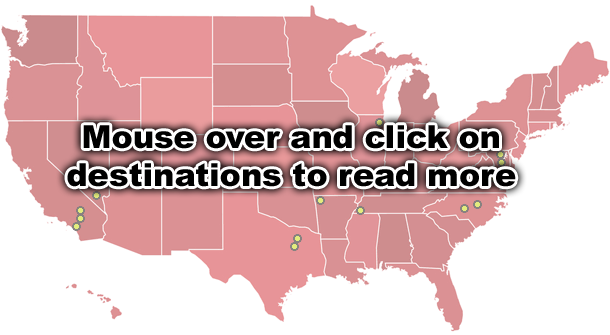
<style>
.page{position:relative;width:610px;height:335px;background:#ffffff}
.page>*{position:absolute;margin:0}
.t1{font:31.8px "Arial-Black";color:#000000}
</style>
<div class="page">
<p class="t1" style="left:67px;top:125px;width:449px;height:62px;text-align:center">Mouse over and click on<br>destinations to read more</p>
</div>
